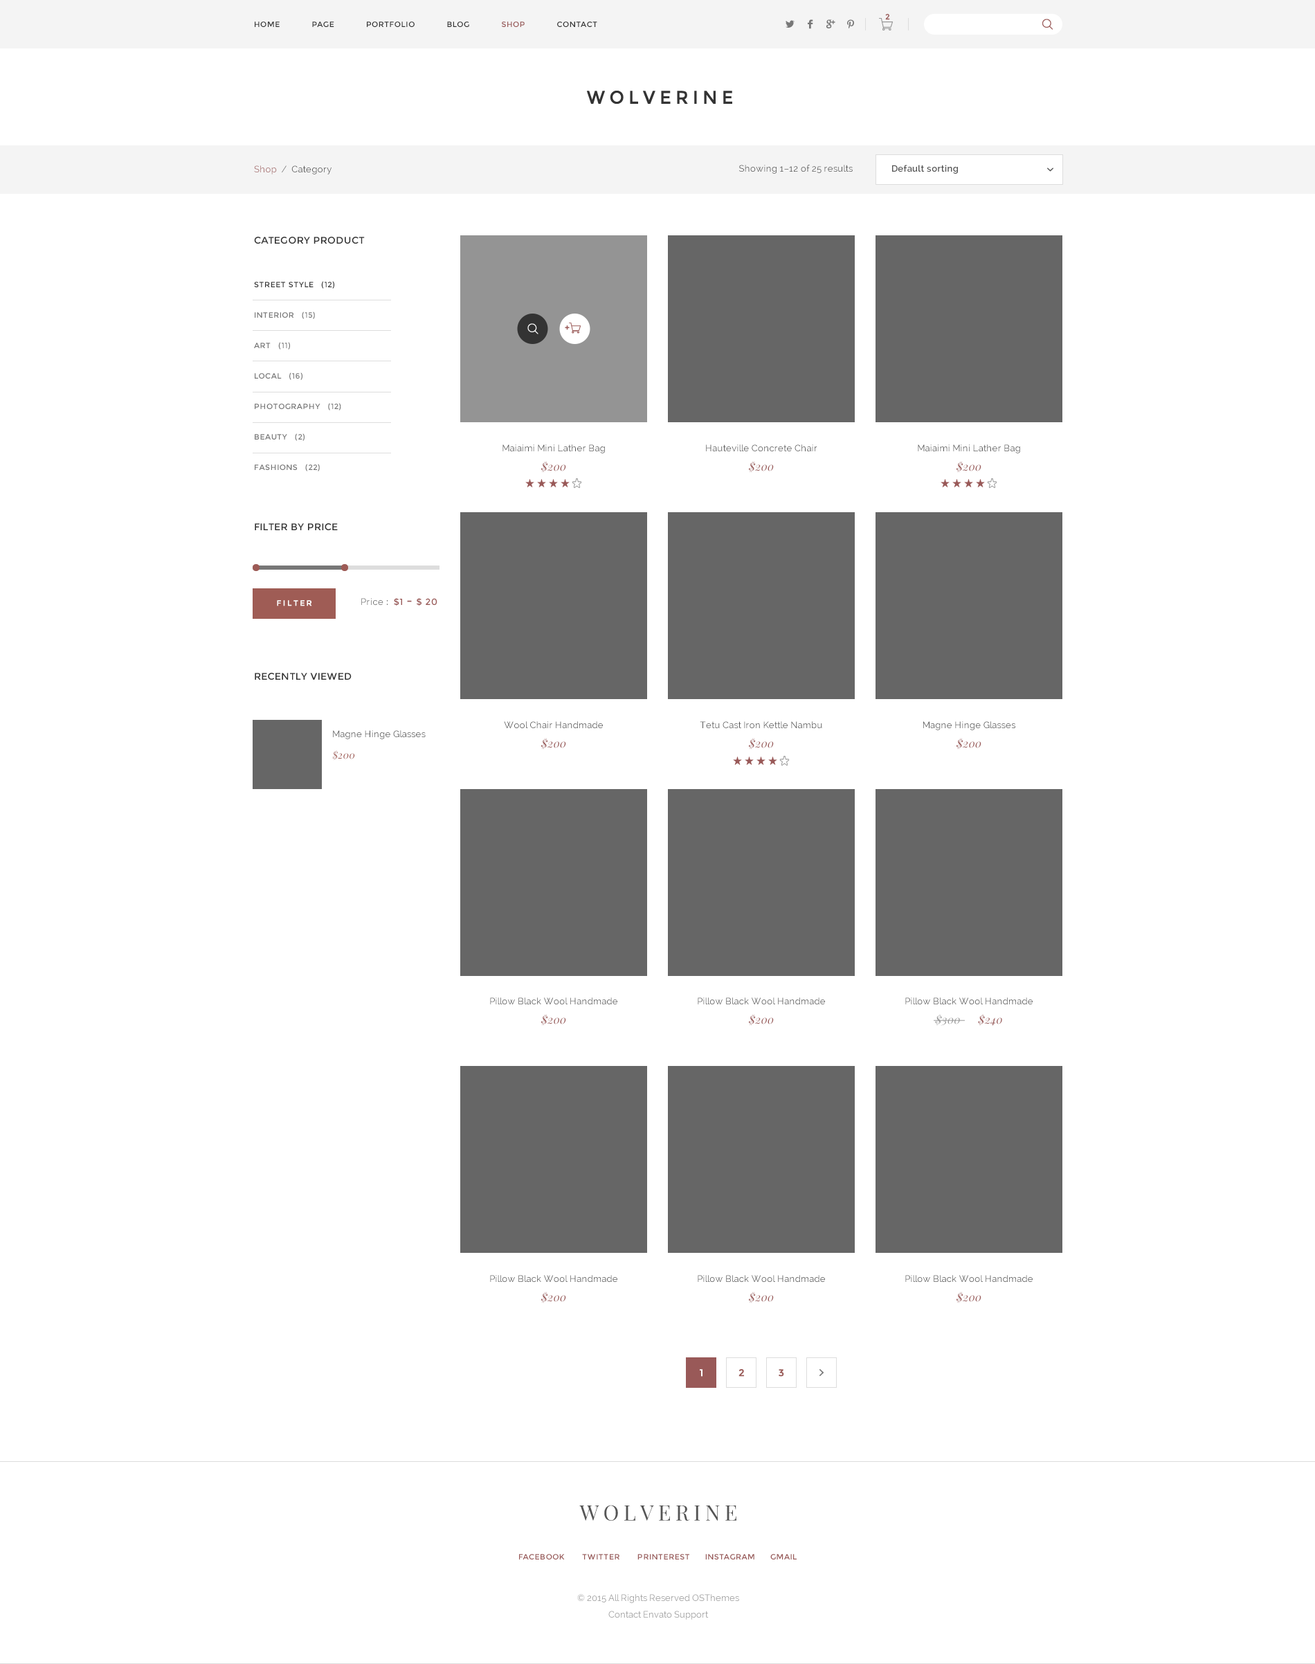
<style>
.page{position:relative;width:1315px;height:1664px;background:#ffffff}
.page>*{position:absolute;margin:0}
.t1{font:7.6px "Montserrat-Regular";color:#9a5a58;font-weight:bold}
.t2{font:7.6px "Montserrat-Regular";letter-spacing:0.05em;color:#333333}
.t3{font:7.6px "Montserrat-Regular";letter-spacing:0.05em;color:#995958}
.t4{font:9px "Raleway";letter-spacing:0.02em;color:#535353}
.t5{font:9px "Raleway";letter-spacing:0.02em;color:#a56c6c}
.t6{font:9px "Raleway";letter-spacing:0.02em;color:#777777}
.t7{font:9px "Raleway";letter-spacing:0.02em;color:#555555}
.t8{font:9px "Raleway-SemiBold";letter-spacing:0.02em;color:#555555}
.t9{font:9.7px "Montserrat-Regular";letter-spacing:0.02em;color:#333333}
.t10{font:7.6px/30.5px "Montserrat-Regular";letter-spacing:0.05em;color:#777777}
.t11{font:7.6px/30.5px "Montserrat-Regular";letter-spacing:0.05em;color:#333333}
.t12{font:9px "Raleway";letter-spacing:0.02em;color:#545454}
.t13{font:11.1px "PlayfairDisplay-Italic";letter-spacing:0.02em;color:#995958}
.t14{font:7.6px "Montserrat-Regular";letter-spacing:0.2em;color:#ffffff;font-weight:bold}
.t15{font:9px "Raleway";letter-spacing:0.04em;color:#666666}
.t16{font:9px "Raleway-SemiBold";letter-spacing:0.04em;color:#666666}
.t17{font:9px "Montserrat-Regular";letter-spacing:0.04em;color:#9a5957}
.t18{font:12.5px "Montserrat-Regular";letter-spacing:0.04em;color:#9a5957}
.t19{font:9px/19.8px "Raleway";letter-spacing:0.02em;color:#525252}
.t20{font:9.7px/21.3px "PlayfairDisplay-Regular";letter-spacing:0.04em;color:#9f5a53;font-style:italic}
.t21{font:11.1px "PlayfairDisplay-Italic";letter-spacing:0.02em;color:#999999}
.t22{font:9.7px "Montserrat-Regular";color:#ffffff;font-weight:bold}
.t23{font:9.7px "Montserrat-Regular";color:#9b5a57;font-weight:bold}
.t24{font:21.4px "PlayfairDisplay-Regular";letter-spacing:0.1em;color:#555555}
.t25{font:9px/16.2px "Raleway";color:#999999}
</style>
<div class="page">
<p class="t1" style="left:885px;top:14px;width:5px;height:6px">2</p>
<p class="t2" style="left:255px;top:21px;width:342px;height:6px">HOME      PAGE      PORTFOLIO      BLOG      <span class="t3">SHOP </span>     CONTACT</p>
<p class="t4" style="left:254px;top:165px;width:78px;height:9px"><span class="t5">Shop</span><span class="t6">  /  </span>Category</p>
<p class="t7" style="left:739px;top:165px;width:114px;height:9px">Showing 1–12 of 25 results</p>
<p class="t8" style="left:892px;top:165px;width:66px;height:9px">Default sorting</p>
<p class="t9" style="left:254px;top:237px;width:111px;height:7px">CATEGORY PRODUCT</p>
<p class="t10" style="left:254px;top:281px;width:87px;height:190px"><span class="t11">STREET STYLE   (12)<br></span>INTERIOR   (15)<br>ART   (11)<br>LOCAL   (16)<br>PHOTOGRAPHY   (12)<br>BEAUTY   (2)<br>FASHIONS   (22)</p>
<p class="t12" style="left:503px;top:444px;width:102px;height:9px">Maiaimi Mini Lather Bag</p>
<p class="t12" style="left:706px;top:444px;width:112px;height:8px">Hauteville Concrete Chair</p>
<p class="t12" style="left:918px;top:444px;width:102px;height:9px">Maiaimi Mini Lather Bag</p>
<p class="t13" style="left:541px;top:461px;width:25px;height:12px">$200</p>
<p class="t13" style="left:749px;top:461px;width:25px;height:12px">$200</p>
<p class="t13" style="left:957px;top:461px;width:25px;height:12px">$200</p>
<p class="t9" style="left:255px;top:523px;width:83px;height:7px">FILTER BY PRICE</p>
<p class="t14" style="left:277px;top:600px;width:35px;height:6px">FILTER</p>
<p class="t15" style="left:361px;top:598px;width:77px;height:8px">Price <span class="t16">:  </span><span class="t17">$1 </span><span class="t18">-</span><span class="t17"> $ 20</span></p>
<p class="t9" style="left:255px;top:673px;width:97px;height:7px">RECENTLY VIEWED</p>
<p class="t4" style="left:504px;top:721px;width:99px;height:8px">Wool Chair Handmade</p>
<p class="t12" style="left:700px;top:721px;width:122px;height:8px">Tetu Cast Iron Kettle Nambu</p>
<p class="t4" style="left:924px;top:721px;width:92px;height:9px">Magne Hinge Glasses</p>
<p class="t19" style="left:332px;top:730px;width:94px;height:30px">Magne Hinge Glasses <br><span class="t20">$200</span></p>
<p class="t13" style="left:541px;top:738px;width:25px;height:12px">$200</p>
<p class="t13" style="left:749px;top:738px;width:25px;height:12px">$200</p>
<p class="t13" style="left:957px;top:738px;width:25px;height:12px">$200</p>
<p class="t7" style="left:490px;top:998px;width:128px;height:7px">Pillow Black Wool Handmade</p>
<p class="t7" style="left:698px;top:998px;width:127px;height:7px">Pillow Black Wool Handmade</p>
<p class="t12" style="left:906px;top:998px;width:127px;height:7px">Pillow Black Wool Handmade</p>
<p class="t13" style="left:541px;top:1014px;width:25px;height:12px">$200</p>
<p class="t13" style="left:749px;top:1014px;width:25px;height:12px">$200</p>
<p class="t21" style="left:935px;top:1014px;width:67px;height:12px">$300<span class="t13">      $240</span></p>
<p class="t7" style="left:490px;top:1275px;width:128px;height:8px">Pillow Black Wool Handmade</p>
<p class="t7" style="left:698px;top:1275px;width:127px;height:8px">Pillow Black Wool Handmade</p>
<p class="t7" style="left:906px;top:1275px;width:127px;height:8px">Pillow Black Wool Handmade</p>
<p class="t13" style="left:541px;top:1292px;width:25px;height:12px">$200</p>
<p class="t13" style="left:749px;top:1292px;width:25px;height:12px">$200</p>
<p class="t13" style="left:957px;top:1292px;width:25px;height:12px">$200</p>
<p class="t22" style="left:700px;top:1369px;width:3px;height:8px">1</p>
<p class="t23" style="left:739px;top:1369px;width:5px;height:8px">2</p>
<p class="t23" style="left:779px;top:1369px;width:5px;height:8px">3</p>
<p class="t24" style="left:579px;top:1505px;width:158px;height:16px">WOLVERINE</p>
<p class="t3" style="left:519px;top:1554px;width:278px;height:6px">FACEBOOK       TWITTER       PRINTEREST      INSTAGRAM      GMAIL</p>
<p class="t25" style="left:577px;top:1594px;width:162px;height:26px;text-align:center">© 2015 All Rights Reserved OSThemes<br>Contact Envato Support</p>
</div>
